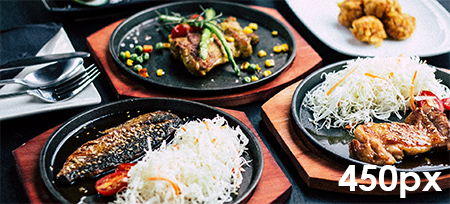
<style>
.page{position:relative;width:450px;height:204px}
.page>*{position:absolute;margin:0}
.t1{font:36px "CenturyGothic-Bold";color:#ffffff}
</style>
<div class="page">
<p class="t1" style="left:338px;top:165px;width:104px;height:33px">450px</p>
</div>
